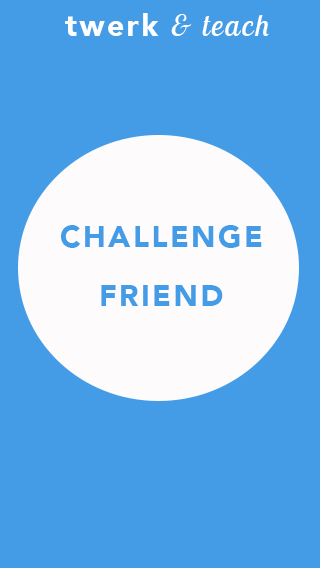
<style>
.page{position:relative;width:320px;height:568px;background:#449ce7}
.page>*{position:absolute;margin:0}
.t1{font:30.2px "LobsterTwo-Italic";letter-spacing:0.075em;color:#feffff}
.t2{font:30.2px "Avenir-Black";letter-spacing:0.075em;color:#feffff}
.t3{font:30.2px "Avenir-Black";letter-spacing:0.075em;color:#449ce7}
</style>
<div class="page">
<p class="t1" style="left:65px;top:13px;width:204px;height:23px"><span class="t2">twerk </span>&amp; teach</p>
<p class="t3" style="left:61px;top:225px;width:201px;height:23px">CHALLENGE</p>
<p class="t3" style="left:101px;top:285px;width:122px;height:21px">FRIEND</p>
</div>
